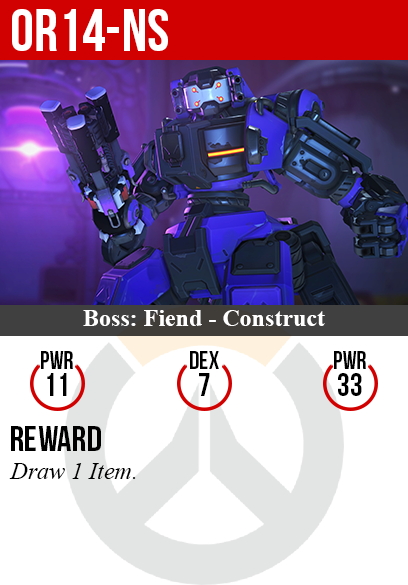
<style>
.page{position:relative;width:408px;height:585px;background:#ffffff}
.page>*{position:absolute;margin:0}
.t1{font:60px "BebasNeue";color:#ffffff}
.t2{font:24px "TimesNewRomanPS-BoldMT";color:#ffffff}
.t3{font:25px "BebasNeue";color:#000000}
.t4{font:32px "BebasNeue";color:#000000}
.t5{font:36px "BebasNeue";color:#000000}
.t6{font:24px "TimesNewRomanPS-ItalicMT";color:#000000}
</style>
<div class="page">
<p class="t1" style="left:12px;top:9px;width:156px;height:42px">or14-ns</p>
<p class="t2" style="left:83px;top:310px;width:242px;height:16px">Boss: Fiend - Construct</p>
<p class="t3" style="left:41px;top:351px;width:32px;height:18px">PWR</p>
<p class="t3" style="left:190px;top:351px;width:29px;height:18px">dex</p>
<p class="t3" style="left:334px;top:351px;width:32px;height:18px">PWR</p>
<p class="t4" style="left:47px;top:373px;width:20px;height:23px">11</p>
<p class="t4" style="left:199px;top:373px;width:11px;height:23px">7</p>
<p class="t4" style="left:338px;top:373px;width:24px;height:23px">33</p>
<p class="t5" style="left:11px;top:426px;width:90px;height:25px">reward</p>
<p class="t6" style="left:9px;top:463px;width:127px;height:16px">Draw 1 Item.</p>
</div>
